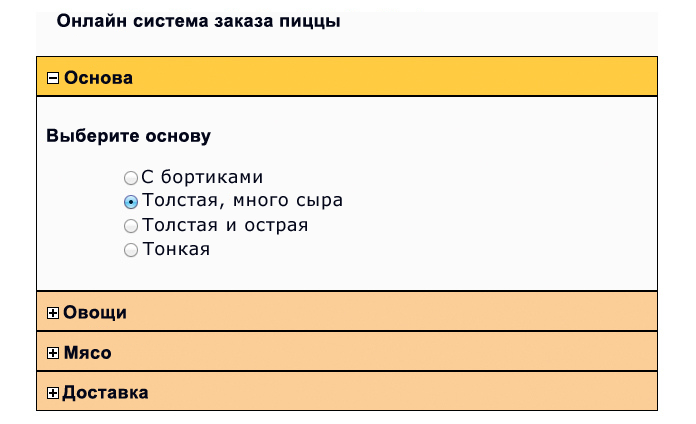
<style>
.page{position:relative;width:696px;height:424px;background:#fbfbfb}
.page>*{position:absolute;margin:0}
.t1{font:18px "Arial-BoldMT";letter-spacing:0.025em;color:#030619}
.t2{font:18px "Verdana";letter-spacing:0.025em;color:#030619}
</style>
<div class="page">
<p class="t1" style="left:57px;top:13px;width:283px;height:17px">Онлайн система заказа пиццы</p>
<p class="t1" style="left:64px;top:70px;width:69px;height:14px">Основа</p>
<p class="t1" style="left:47px;top:128px;width:164px;height:18px">Выберите основу</p>
<p class="t2" style="left:142px;top:169px;width:120px;height:18px">С бортиками</p>
<p class="t2" style="left:142px;top:193px;width:200px;height:17px">Толстая, много сыра</p>
<p class="t2" style="left:142px;top:218px;width:165px;height:17px">Толстая и острая</p>
<p class="t2" style="left:142px;top:242px;width:67px;height:14px">Тонкая</p>
<p class="t1" style="left:63px;top:305px;width:63px;height:16px">Овощи</p>
<p class="t1" style="left:64px;top:345px;width:47px;height:14px">Мясо</p>
<p class="t1" style="left:62px;top:385px;width:86px;height:17px">Доставка</p>
</div>
